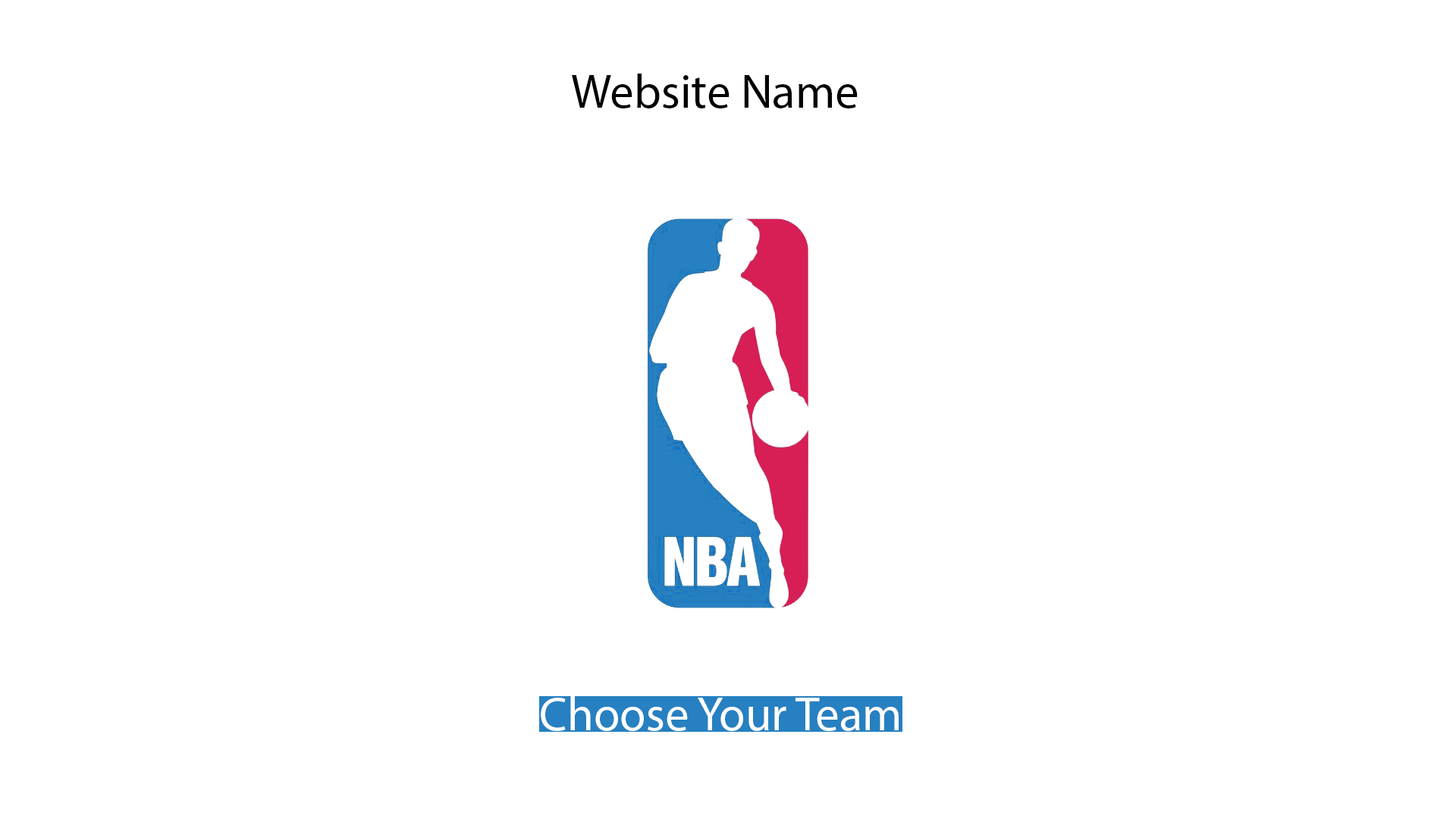
<style>
.page{position:relative;width:1456px;height:819px;background:#ffffff}
.page>*{position:absolute;margin:0}
.t1{font:47.8px "MyriadPro-Regular";color:#000000}
.t2{font:47.8px "MyriadPro-Regular";color:#ffffff}
</style>
<div class="page">
<p class="t1" style="left:572px;top:74px;width:286px;height:34px">Website Name</p>
<p class="t2" style="left:541px;top:696px;width:358px;height:35px">Choose Your Team</p>
</div>
